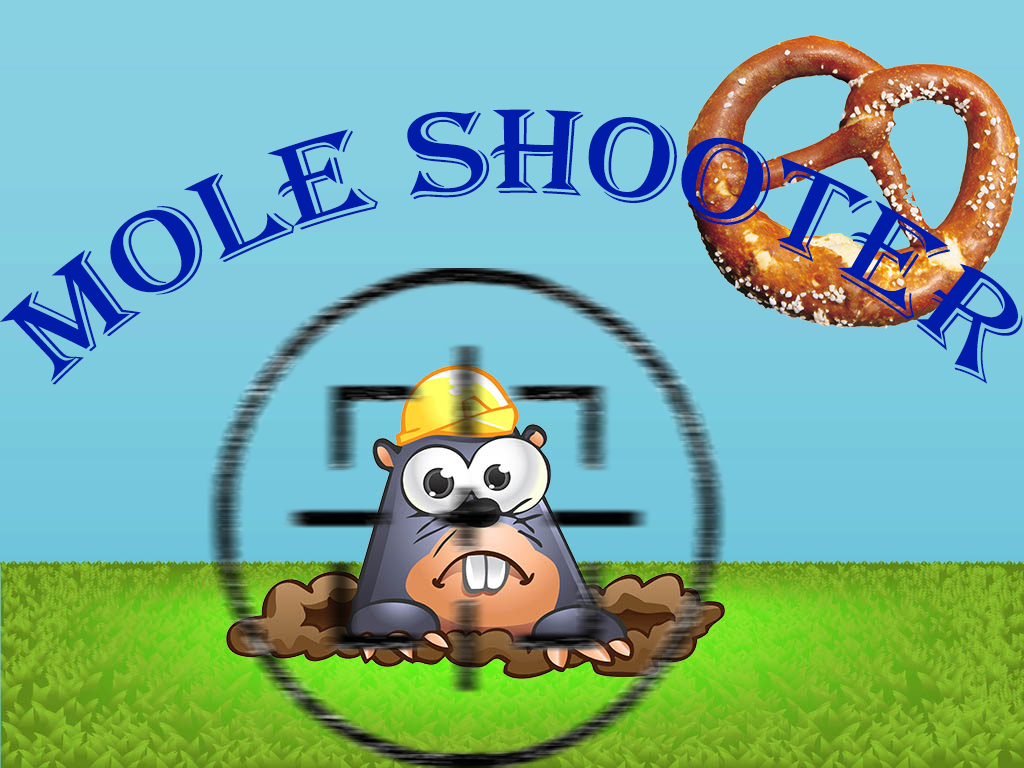
<style>
.page{position:relative;width:1024px;height:768px}
.page>*{position:absolute;margin:0}
.t1{font:125px "Algerian";color:#001ca8}
</style>
<div class="page">
<p class="t1" style="left:0px;top:109px;width:1023px;height:276px">Mole Shooter</p>
</div>
